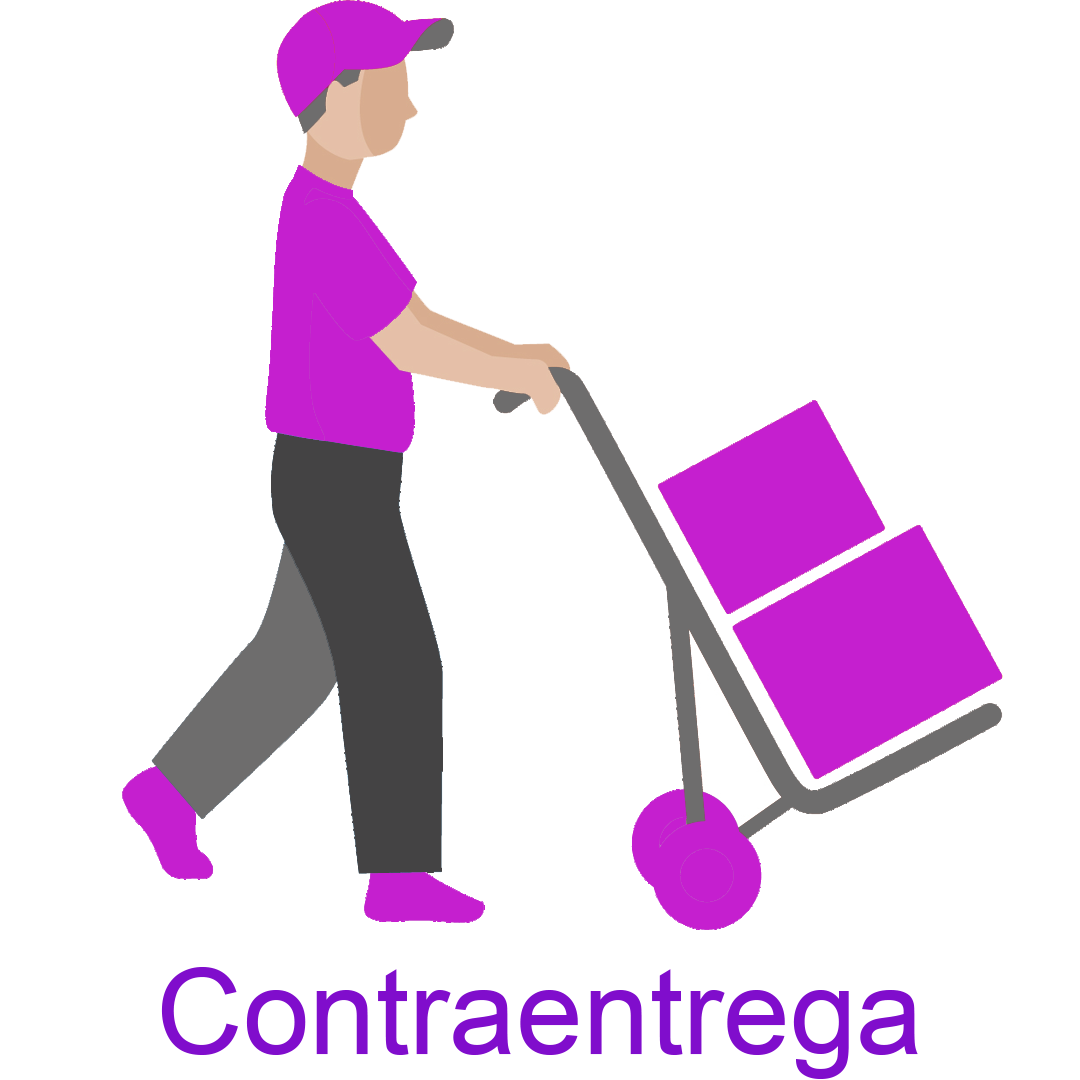
<style>
.page{position:relative;width:1080px;height:1080px;background:#ffffff}
.page>*{position:absolute;margin:0}
.t1{font:120px "ArialMT";color:#800dcc}
</style>
<div class="page">
<p class="t1" style="left:161px;top:967px;width:757px;height:112px">Contraentrega</p>
</div>
